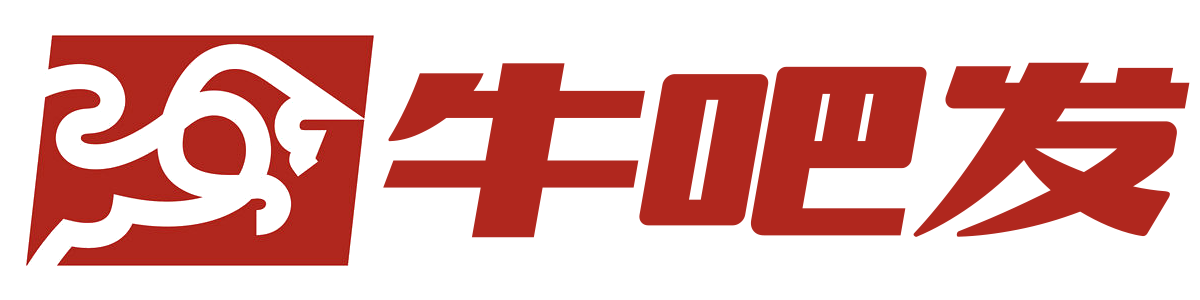
<style>
.page{position:relative;width:1200px;height:300px;background:#ffffff}
.page>*{position:absolute;margin:0}
.t1{font:270px "MF-WenYa-Noncommercial-Regular";color:#b0271e;font-style:italic}
</style>
<div class="page">
<p class="t1" style="left:383px;top:62px;width:807px;height:176px">牛吧发</p>
</div>
